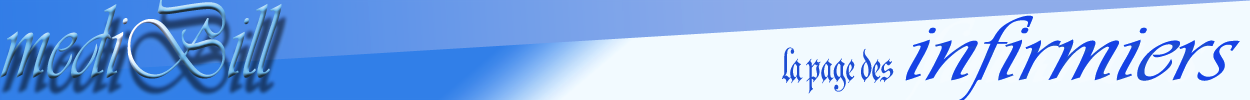
<style>
.page{position:relative;width:1250px;height:100px;background:#f2faff}
.page>*{position:absolute;margin:0}
.t1{font:110.1px "Vivaldii";scale:0.78 1}
.t2{font:80.6px "Parchment-Regular";color:#1e4ed0;scale:0.73 1}
</style>
<div class="page">
<p class="t1" style="left:0px;top:0px;width:282px;height:79px">mediBill</p>
<p class="t2" style="left:782px;top:47px;width:112px;height:47px">la page des</p>
</div>
